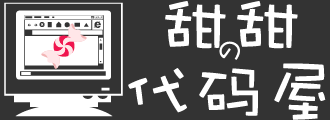
<style>
.page{position:relative;width:330px;height:120px;background:#333333}
.page>*{position:absolute;margin:0}
.t1{font:72px/60px "DFWaWaSC-W5";color:#ffffff}
.t2{font:72px/48px "DFWaWaSC-W5";color:#ffffff}
.t3{font:30px/18px "DFWaWaSC-W5";color:#ffffff}
</style>
<div class="page">
<p class="t1" style="left:128px;top:1px;width:198px;height:119px;text-align:center"><span class="t2">甜甜<br></span><span class="t3">の<br></span>代码屋</p>
</div>
